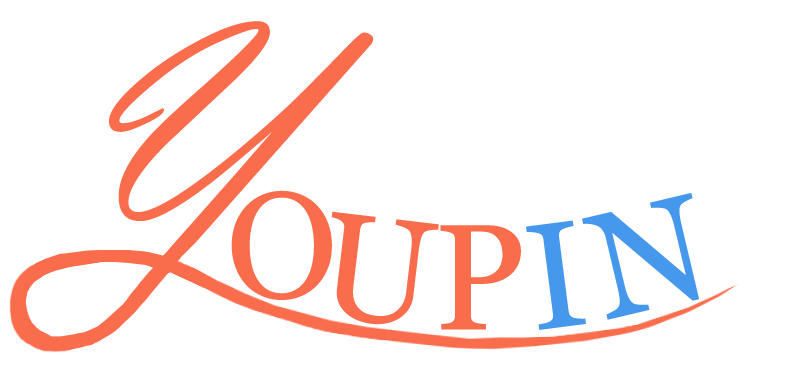
<style>
.page{position:relative;width:800px;height:387px;background:#ffffff}
.page>*{position:absolute;margin:0}
.t1{font:150px "Georgia";color:#f96c4c}
.t2{font:150px "Georgia";color:#4698ec}
</style>
<div class="page">
<p class="t1" style="left:231px;top:190px;width:101px;height:110px">O</p>
<p class="t2" style="left:582px;top:193px;width:117px;height:127px;rotate:-13deg">N</p>
<p class="t1" style="left:331px;top:211px;width:108px;height:114px;rotate:7deg">U</p>
<p class="t2" style="left:526px;top:220px;width:60px;height:110px;rotate:-7deg">I</p>
<p class="t1" style="left:440px;top:225px;width:81px;height:105px">P</p>
</div>
